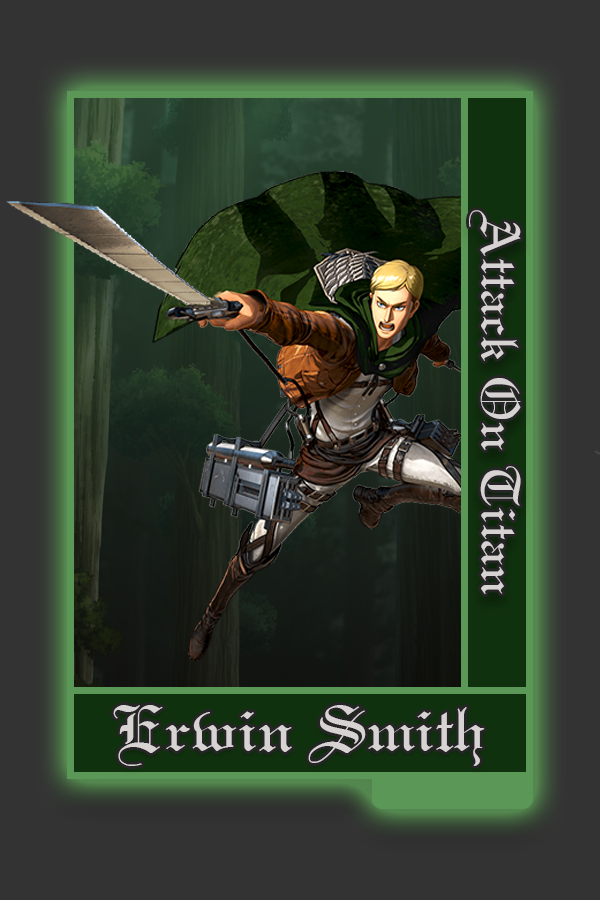
<style>
.page{position:relative;width:600px;height:900px;background:#333333}
.page>*{position:absolute;margin:0}
.t1{font:58.3px "Linotext";color:#d7d4d4}
.t2{font:70.1px "Linotext";color:#d7d4d4}
</style>
<div class="page">
<p class="t1" style="left:469px;top:210px;width:52px;height:384px;rotate:90deg">Attack On Titan</p>
<p class="t2" style="left:113px;top:705px;width:372px;height:61px">Erwin Smith</p>
</div>
